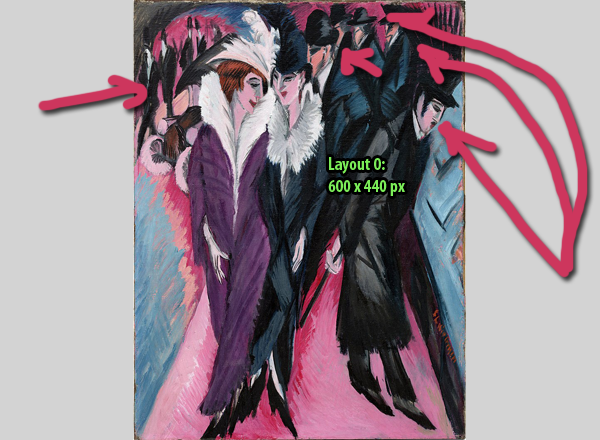
<style>
.page{position:relative;width:600px;height:440px;background:#d3d3d3}
.page>*{position:absolute;margin:0}
.t1{font:18px "MyriadPro-BoldCond";color:#7bed58}
</style>
<div class="page">
<p class="t1" style="left:328px;top:157px;width:77px;height:39px">Layout 0:<br>600 x 440 px</p>
</div>
